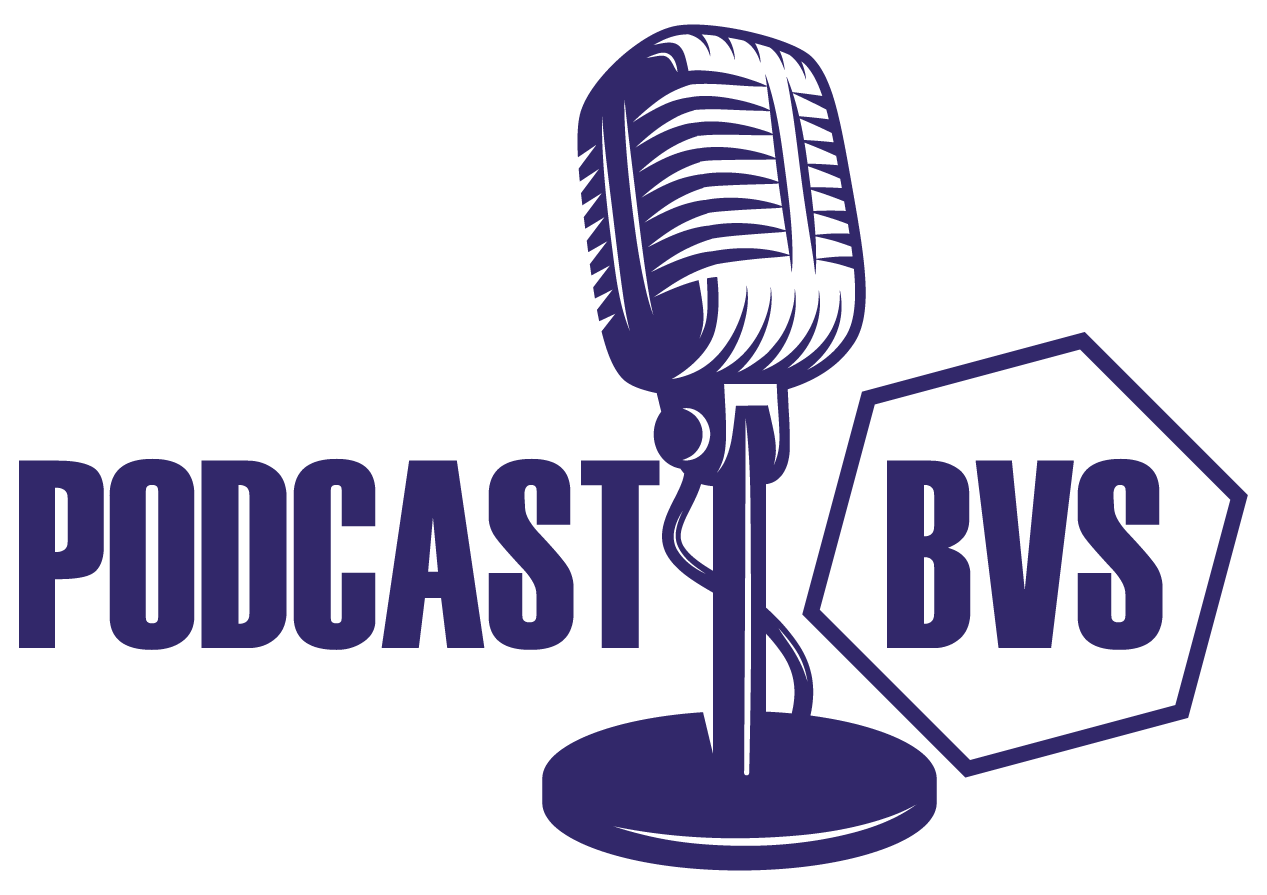
<style>
.page{position:relative;width:1267px;height:895px;background:#ffffff}
.page>*{position:absolute;margin:0}
.t1{font:267.6px "Haettenschweiler";color:#32286a;scale:0.9 1}
</style>
<div class="page">
<p class="t1" style="left:19px;top:458px;width:641px;height:192px">PODCAST</p>
<p class="t1" style="left:887px;top:458px;width:276px;height:192px">BVS</p>
</div>
